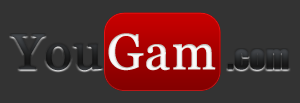
<style>
.page{position:relative;width:300px;height:103px;background:#333333}
.page>*{position:absolute;margin:0}
.t1{font:50.3px "Georgia";color:#ffffff;font-weight:bold}
.t2{font:30px "Impact";color:#262728;font-weight:bold}
</style>
<div class="page">
<p class="t1" style="left:108px;top:33px;width:108px;height:38px">Gam</p>
<p class="t2" style="left:227px;top:49px;width:62px;height:21px">.com</p>
</div>
